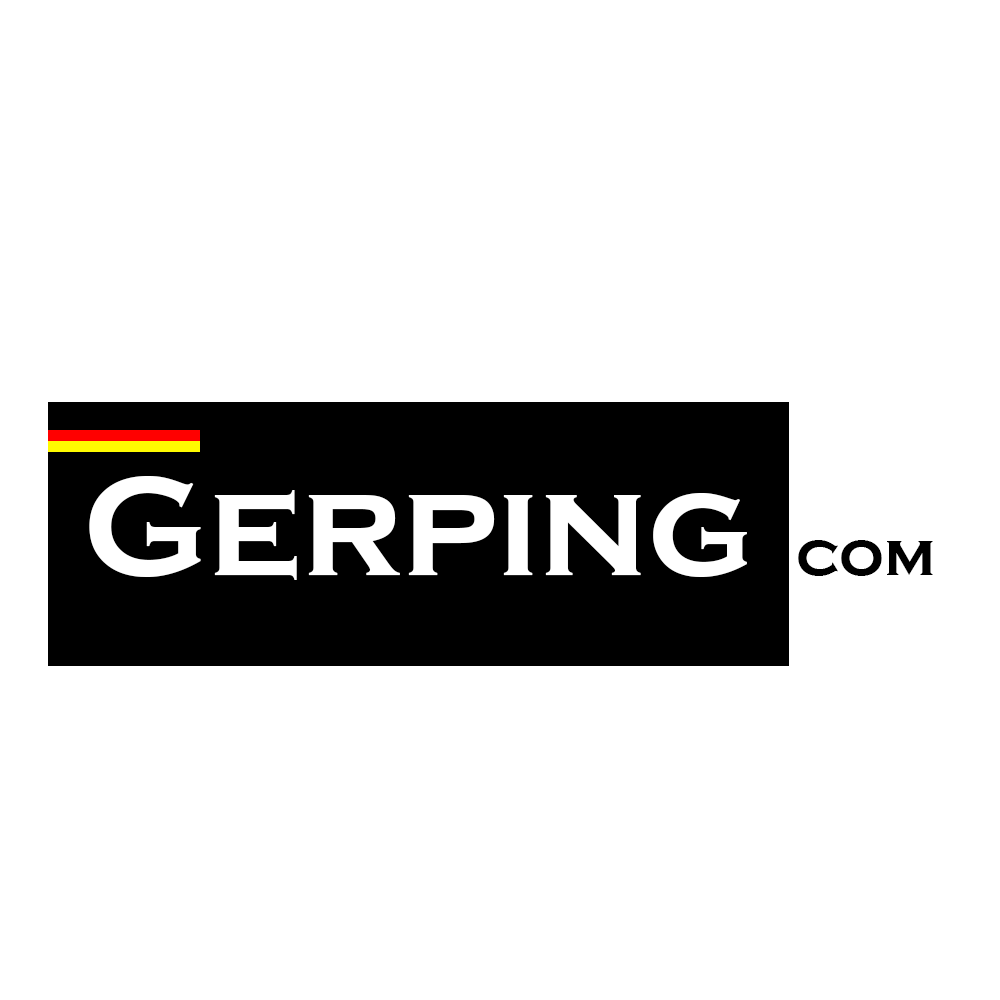
<style>
.page{position:relative;width:1000px;height:1000px;background:#ffffff}
.page>*{position:absolute;margin:0}
.t1{font:145.8px "CopperplateGothic-Bold";color:#ffffff}
.t2{font:62.5px "CopperplateGothic-Bold";color:#ffffff}
.t3{font:62.5px "CopperplateGothic-Bold";color:#000000}
</style>
<div class="page">
<p class="t1" style="left:89px;top:476px;width:658px;height:104px"><span class="t2"><br></span>Gerping</p>
<p class="t3" style="left:798px;top:540px;width:135px;height:36px">com</p>
</div>
